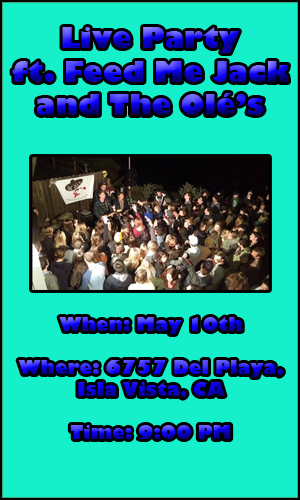
<style>
.page{position:relative;width:300px;height:500px;background:#16f0ca}
.page>*{position:absolute;margin:0}
.t1{font:28px "GillSans-UltraBold"}
.t2{font:18px "GillSans-UltraBold"}
</style>
<div class="page">
<p class="t1" style="left:12px;top:27px;width:276px;height:88px;text-align:center">Live Party<br>ft. Feed Me Jack<br>and The Olé’s</p>
<p class="t2" style="left:18px;top:317px;width:265px;height:122px;text-align:center">When: May 10th<br><br>Where: 6757 Del Playa,<br>Isla Vista, CA<br><br>Time: 9:00 PM</p>
</div>
